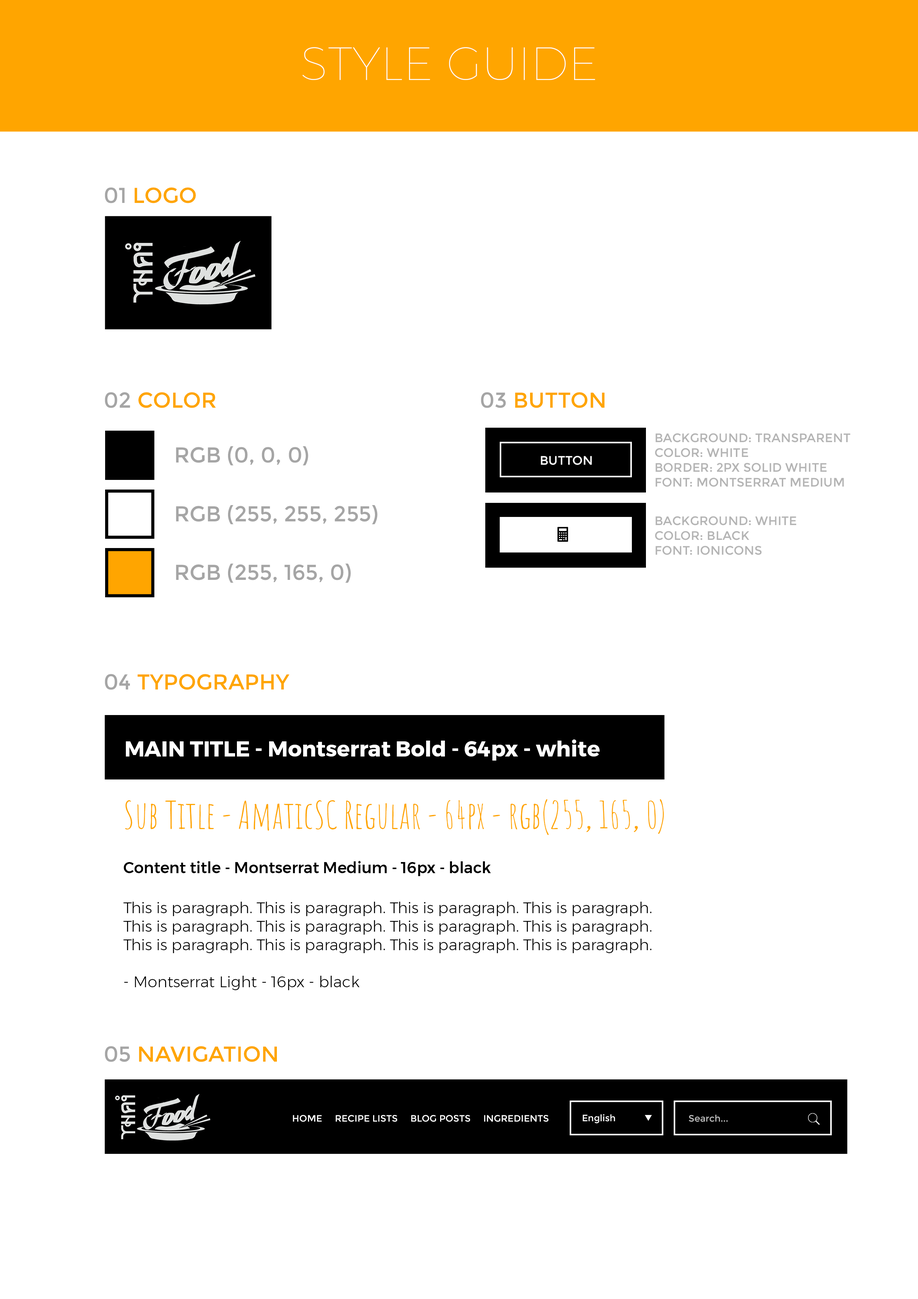
<style>
.page{position:relative;width:918px;height:1299px;background:#ffffff}
.page>*{position:absolute;margin:0}
.t1{font:46.3px "Montserrat-Thin";color:#ffffff}
.t2{font:21.6px "Montserrat-Regular";color:#ffa500}
.t3{font:21.6px "Montserrat-Regular";color:#a5a5a5}
.t4{font:12.3px "Montserrat-Regular";color:#b4b4b4}
.t5{font:12.3px "Montserrat-Regular";color:#ffffff}
.t6{font:21.6px "Montserrat-Bold";color:#ffffff}
.t7{font:37px "AmaticSC-Regular";color:#ffa500}
.t8{font:15.4px "Montserrat-Medium";color:#000000}
.t9{font:15.4px "Montserrat-Light";color:#000000}
.t10{font:9.3px "Montserrat-Regular";color:#ffffff}
.t11{font:9.3px "Montserrat-Regular";color:#bababa}
</style>
<div class="page">
<p class="t1" style="left:302px;top:47px;width:293px;height:33px">STYLE GUIDE</p>
<p class="t2" style="left:105px;top:187px;width:91px;height:16px"><span class="t3">01 </span>LOGO</p>
<p class="t2" style="left:105px;top:392px;width:111px;height:16px"><span class="t3">02 </span>COLOR</p>
<p class="t2" style="left:481px;top:392px;width:124px;height:16px"><span class="t3">03 </span>BUTTON</p>
<p class="t4" style="left:655px;top:433px;width:195px;height:54px">BACKGROUND: TRANSPARENT<br>COLOR: WHITE<br>BORDER: 2PX SOLID WHITE<br>FONT: MONTSERRAT MEDIUM</p>
<p class="t3" style="left:176px;top:446px;width:132px;height:19px">RGB (0, 0, 0)</p>
<p class="t5" style="left:541px;top:456px;width:51px;height:9px">BUTTON</p>
<p class="t3" style="left:176px;top:505px;width:202px;height:19px">RGB (255, 255, 255)</p>
<p class="t4" style="left:655px;top:516px;width:141px;height:39px">BACKGROUND: WHITE<br>COLOR: BLACK<br>FONT: IONICONS</p>
<p class="t3" style="left:176px;top:563px;width:175px;height:20px">RGB (255, 165, 0)</p>
<p class="t2" style="left:105px;top:674px;width:185px;height:16px"><span class="t3">04 </span>TYPOGRAPHY</p>
<p class="t6" style="left:126px;top:739px;width:474px;height:21px">MAIN TITLE - Montserrat Bold - 64px - white</p>
<p class="t7" style="left:125px;top:799px;width:539px;height:36px">Sub Title - AmaticSC Regular - 64px - rgb(255, 165, 0)</p>
<p class="t8" style="left:124px;top:861px;width:367px;height:15px">Content title - Montserrat Medium - 16px - black</p>
<p class="t9" style="left:123px;top:901px;width:529px;height:89px">This is paragraph. This is paragraph. This is paragraph. This is paragraph. <br>This is paragraph. This is paragraph. This is paragraph. This is paragraph. <br>This is paragraph. This is paragraph. This is paragraph. This is paragraph.<br><br>- Montserrat Light - 16px - black</p>
<p class="t2" style="left:105px;top:1046px;width:172px;height:16px"><span class="t3">05 </span>NAVIGATION</p>
<p class="t10" style="left:293px;top:1115px;width:256px;height:7px">HOME     RECIPE LISTS     BLOG POSTS     INGREDIENTS</p>
<p class="t10" style="left:583px;top:1114px;width:32px;height:9px">English</p>
<p class="t11" style="left:689px;top:1114px;width:39px;height:8px">Search...</p>
</div>
